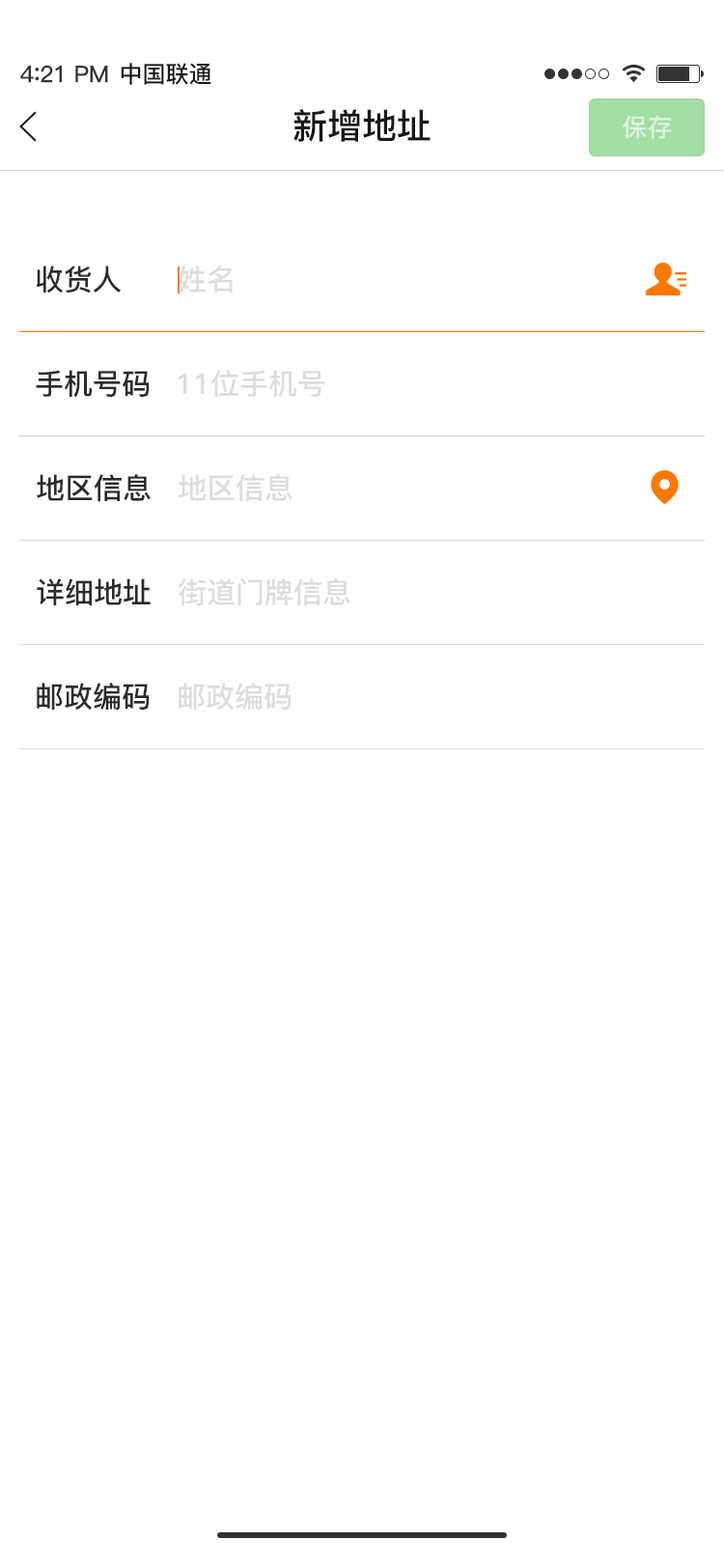
<style>
.page{position:relative;width:724px;height:1568px;background:#ffffff}
.page>*{position:absolute;margin:0}
.t1{font:23.2px "PingFang-SC-Bold";letter-spacing:-0.02em;color:#333333}
.t2{font:25.1px "PingFang-SC-Bold";letter-spacing:-0.02em;color:#333333}
.t3{font:23.2px "PingFang-SC-Bold";color:#181818}
.t4{font:34.8px "PingFang-SC-Bold";color:#181818}
.t5{font:25.1px "PingFang-SC-Bold";color:#ddf2dd}
.t6{font:29px "PingFang-SC-Bold";color:#2b2b2b}
.t7{font:29px "PingFang-SC-Bold";color:#dddddd}
</style>
<div class="page">
<p class="t1" style="left:20px;top:65px;width:88px;height:18px">4<span class="t2">:</span>21 PM</p>
<p class="t3" style="left:121px;top:63px;width:90px;height:22px">中国联通</p>
<p class="t4" style="left:294px;top:109px;width:137px;height:33px">新增地址</p>
<p class="t5" style="left:623px;top:115px;width:49px;height:24px">保存</p>
<p class="t6" style="left:36px;top:266px;width:85px;height:28px">收货人</p>
<p class="t7" style="left:179px;top:266px;width:54px;height:28px">姓名</p>
<p class="t6" style="left:36px;top:370px;width:114px;height:28px">手机号码</p>
<p class="t7" style="left:179px;top:370px;width:146px;height:28px">11位手机号</p>
<p class="t6" style="left:37px;top:474px;width:114px;height:28px">地区信息</p>
<p class="t7" style="left:179px;top:474px;width:114px;height:28px">地区信息</p>
<p class="t6" style="left:37px;top:578px;width:114px;height:27px">详细地址</p>
<p class="t7" style="left:179px;top:578px;width:171px;height:28px">街道门牌信息</p>
<p class="t6" style="left:37px;top:683px;width:113px;height:27px">邮政编码</p>
<p class="t7" style="left:179px;top:683px;width:113px;height:27px">邮政编码</p>
</div>
